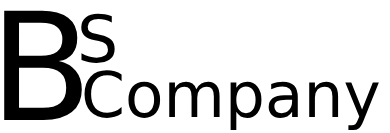
<style>
.page{position:relative;width:390px;height:133px;background:#ffffff}
.page>*{position:absolute;margin:0}
.t1{font:150px "DejaVuSans";color:#000000}
.t2{font:65px "DejaVuSans";color:#000000}
.t3{font:63px "DejaVuSans";color:#000000}
</style>
<div class="page">
<p class="t1" style="left:4px;top:10px;width:78px;height:110px">B</p>
<p class="t2" style="left:81px;top:13px;width:34px;height:50px">S</p>
<p class="t3" style="left:84px;top:70px;width:295px;height:61px">Company</p>
</div>
